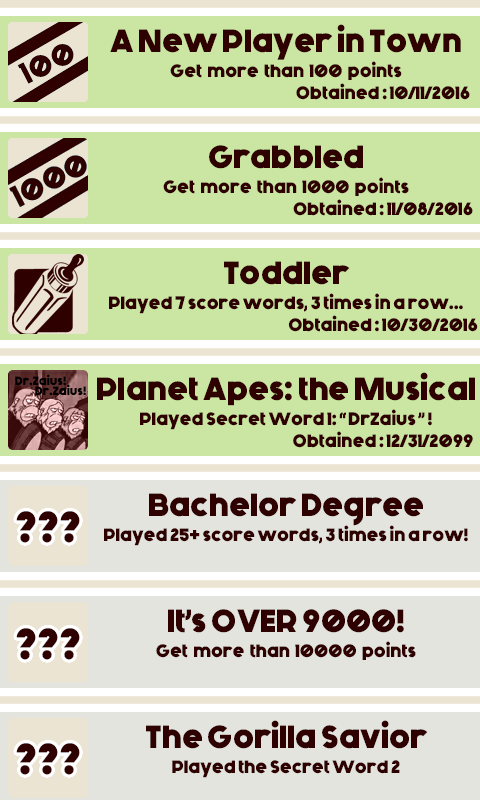
<style>
.page{position:relative;width:480px;height:800px;background:#cbe6a3}
.page>*{position:absolute;margin:0}
.t1{font:32px "Generica-Bold";color:#2f0000}
.t2{font:18px "Generica-Bold";color:#2f0000}
.t3{font:43.6px "Generica-Bold";color:#2f0000}
</style>
<div class="page">
<p class="t1" style="left:110px;top:24px;width:351px;height:36px">A New Player in Town</p>
<p class="t2" style="left:170px;top:61px;width:232px;height:19px">Get  more  than  100  points</p>
<p class="t2" style="left:296px;top:83px;width:174px;height:17px">Obtained : 10/11/2016</p>
<p class="t1" style="left:209px;top:145px;width:154px;height:24px">Grabbled</p>
<p class="t2" style="left:163px;top:177px;width:246px;height:19px">Get  more  than  1000  points</p>
<p class="t2" style="left:293px;top:199px;width:180px;height:17px">Obtained : 11/08/2016</p>
<p class="t1" style="left:224px;top:261px;width:126px;height:24px">Toddler</p>
<p class="t2" style="left:109px;top:293px;width:354px;height:21px">Played 7 score words, 3 times in a row...</p>
<p class="t2" style="left:288px;top:315px;width:190px;height:17px">Obtained : 10/30/2016</p>
<p class="t1" style="left:97px;top:372px;width:378px;height:34px">Planet Apes: the Musical</p>
<p class="t2" style="left:140px;top:409px;width:292px;height:21px">Played Secret Word 1: “ DrZaius ” !</p>
<p class="t2" style="left:293px;top:431px;width:180px;height:17px">Obtained : 12/31/2099</p>
<p class="t1" style="left:149px;top:493px;width:274px;height:33px">Bachelor Degree</p>
<p class="t3" style="left:16px;top:511px;width:64px;height:32px">???</p>
<p class="t2" style="left:104px;top:525px;width:364px;height:21px">Played 25+ score words, 3 times in a row!</p>
<p class="t1" style="left:168px;top:609px;width:236px;height:24px">It’s OVER 9000!</p>
<p class="t3" style="left:16px;top:628px;width:64px;height:32px">???</p>
<p class="t2" style="left:156px;top:641px;width:260px;height:19px">Get  more  than  10000  points</p>
<p class="t1" style="left:146px;top:720px;width:282px;height:29px">The Gorilla Savior</p>
<p class="t3" style="left:16px;top:743px;width:64px;height:32px">???</p>
<p class="t2" style="left:172px;top:760px;width:228px;height:18px">Played the Secret Word 2</p>
</div>
